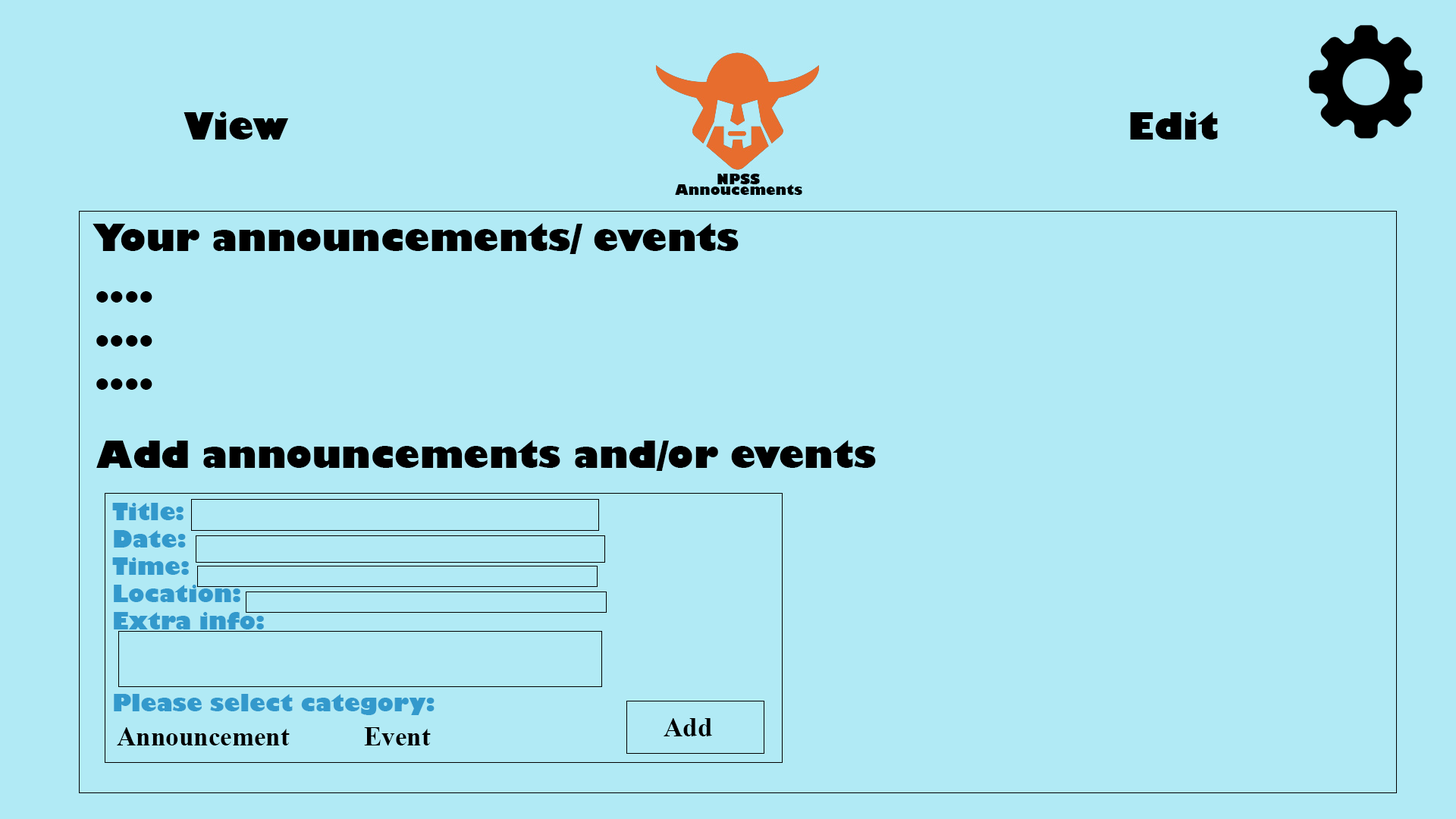
<style>
.page{position:relative;width:1456px;height:819px;background:#b1eaf5}
.page>*{position:absolute;margin:0}
.t1{font:36.4px "GillSans-UltraBold";color:#000000}
.t2{font:22.7px "GillSans-UltraBold";color:#3399cc}
.t3{font:26.5px "TimesNewRomanPS-BoldMT";color:#000000}
</style>
<div class="page">
<p class="t1" style="left:184px;top:111px;width:105px;height:29px">View</p>
<p class="t1" style="left:1130px;top:111px;width:88px;height:29px">Edit</p>
<p class="t1" style="left:93px;top:223px;width:646px;height:31px">Your announcements/ events</p>
<p class="t1" style="left:96px;top:291px;width:56px;height:99px">....<br>....<br>....</p>
<p class="t1" style="left:96px;top:440px;width:780px;height:31px">Add announcements and/or events</p>
<p class="t2" style="left:112px;top:503px;width:323px;height:212px">Title: <br>Date:<br>Time:<br>Location:<br>Extra info:<br><br><br>Please select category:</p>
<p class="t3" style="left:664px;top:718px;width:48px;height:18px">Add</p>
<p class="t3" style="left:117px;top:727px;width:314px;height:18px">Announcement   Event</p>
</div>
